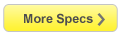
<style>
.page{position:relative;width:121px;height:35px;background:#ffffff}
.page>*{position:absolute;margin:0}
.t1{font:12.5px "Arial-BoldMT";color:#4d4d4f}
</style>
<div class="page">
<p class="t1" style="left:24px;top:13px;width:69px;height:13px">More Specs</p>
</div>
